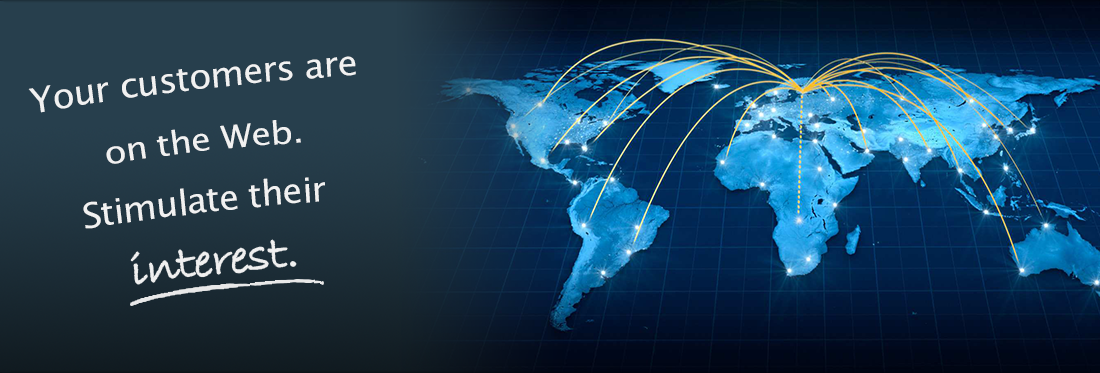
<style>
.page{position:relative;width:1100px;height:373px}
.page>*{position:absolute;margin:0}
.t1{font:35.1px "LucidaSansUnicode";letter-spacing:-0.025em;color:#f1f1f1;scale:1.03 1}
.t2{font:31.9px "LucidaSansUnicode";letter-spacing:-0.025em;color:#f1f1f1;scale:1.13 1}
.t3{font:34.9px "LucidaSansUnicode";letter-spacing:-0.025em;color:#f1f1f1;scale:1.04 1}
</style>
<div class="page">
<p class="t1" style="left:28px;top:56px;width:328px;height:57px;rotate:2deg">Your customers are</p>
<p class="t2" style="left:106px;top:120px;width:195px;height:44px;rotate:4deg">on the Web.</p>
<p class="t3" style="left:83px;top:177px;width:242px;height:52px;rotate:2deg">Stimulate their</p>
</div>
